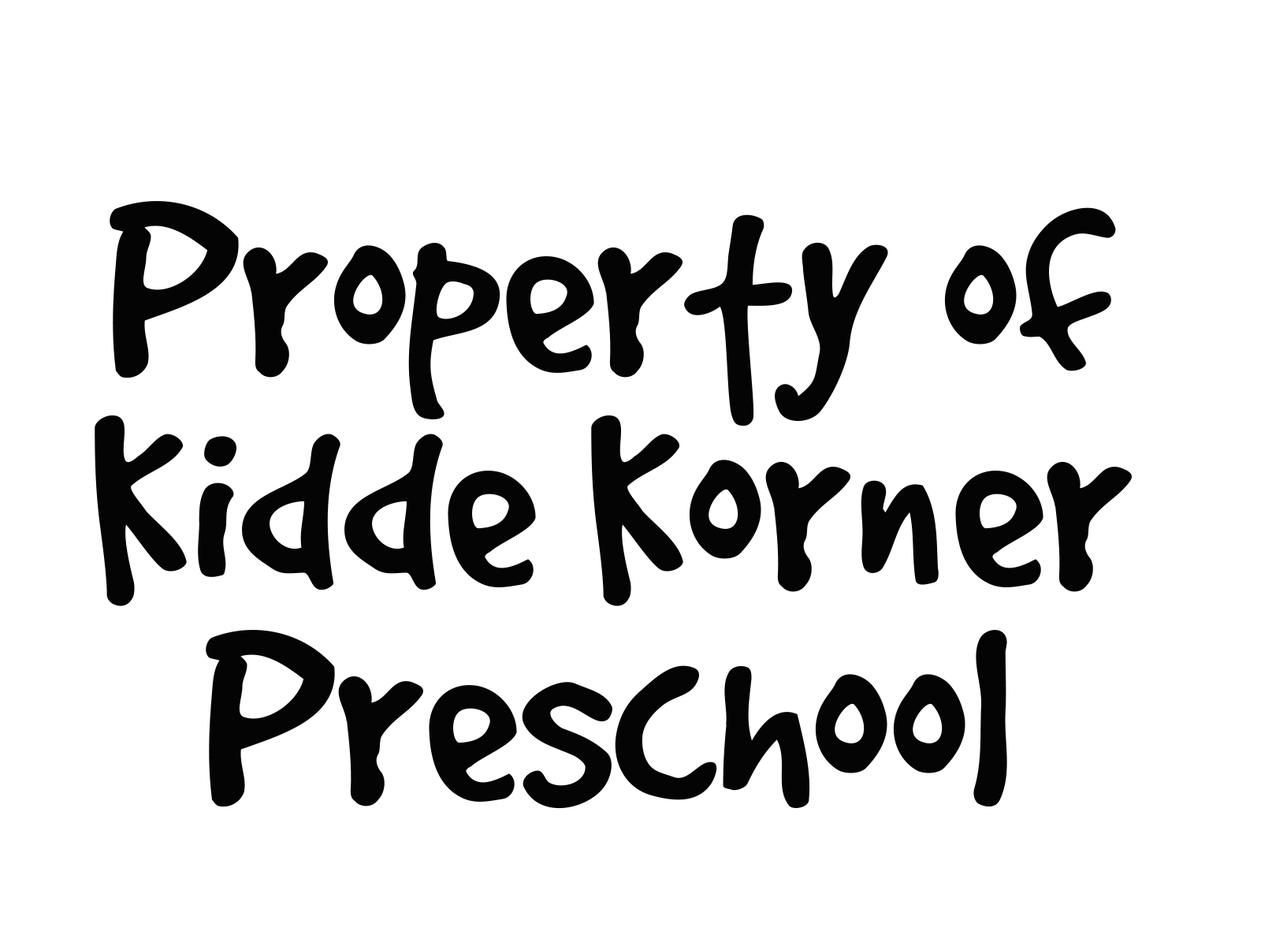
<style>
.page{position:relative;width:1261px;height:946px;background:#ffffff}
.page>*{position:absolute;margin:0}
.t1{font:275.8px/214.4px "GoodDog";color:#040404}
</style>
<div class="page">
<p class="t1" style="left:95px;top:201px;width:1037px;height:608px;text-align:center">Property of <br>Kidde Korner <br>Preschool</p>
</div>
